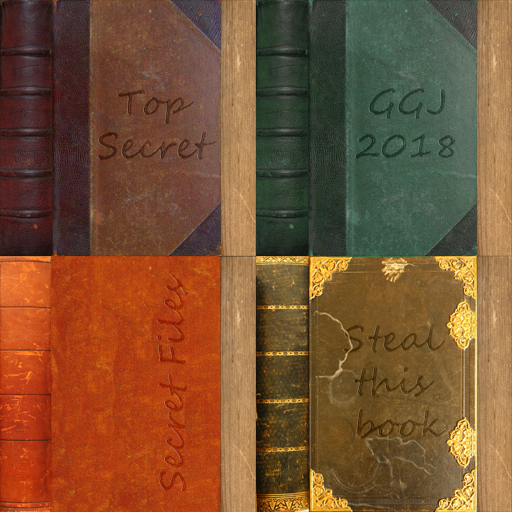
<style>
.page{position:relative;width:512px;height:512px}
.page>*{position:absolute;margin:0}
.t1{font:36px "SegoeScript-Bold";color:#2a4132}
.t2{font:36px "SegoeScript-Bold";color:#512d1d}
.t3{font:36px "SegoeScript-Bold";color:#9b2806}
.t4{font:36px "SegoeScript-Bold";color:#543a13}
</style>
<div class="page">
<p class="t1" style="left:354px;top:88px;width:102px;height:71px;text-align:center">GGJ<br>2018</p>
<p class="t2" style="left:97px;top:90px;width:119px;height:70px;text-align:center">Top <br>Secret</p>
<p class="t3" style="left:156px;top:273px;width:32px;height:219px;rotate:-90deg">Secret Files</p>
<p class="t4" style="left:343px;top:324px;width:104px;height:115px;text-align:center">Steal <br>this <br>book</p>
</div>
